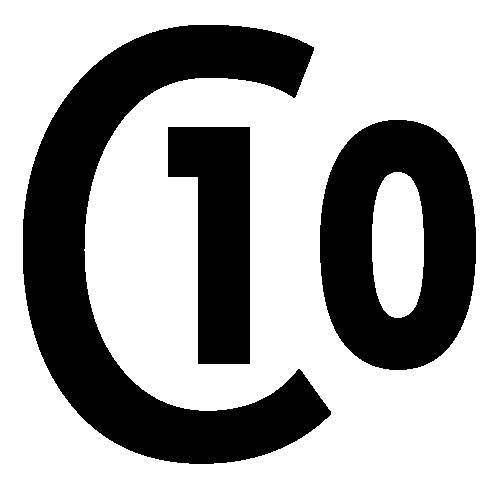
<style>
.page{position:relative;width:488px;height:504px;background:#ffffff}
.page>*{position:absolute;margin:0}
.t1{font:592px "TrebuchetMS";color:#000000}
.t2{font:364px "TwCenMT-CondensedExtraBold";color:#000000}
</style>
<div class="page">
<p class="t1" style="left:23px;top:25px;width:308px;height:439px">C</p>
<p class="t2" style="left:168px;top:120px;width:308px;height:250px">10</p>
</div>
